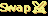
<style>
.page{position:relative;width:48px;height:16px;background:#000000}
.page>*{position:absolute;margin:0}
.t1{font:11px "Meiryo";color:#f0f080;font-weight:bold}
.t2{font:11px "SegoeUIEmoji";color:#f0f080;font-weight:bold}
</style>
<div class="page">
<p class="t1" style="left:0px;top:1px;width:46px;height:12px">Swap<span class="t2">⚔</span></p>
</div>
